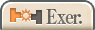
<style>
.page{position:relative;width:95px;height:30px}
.page>*{position:absolute;margin:0}
.t1{font:20px "RyuminPro-ExBold";letter-spacing:-0.08em;color:#696660;scale:0.9 1}
</style>
<div class="page">
<p class="t1" style="left:46px;top:9px;width:36px;height:15px">Exer.</p>
</div>
